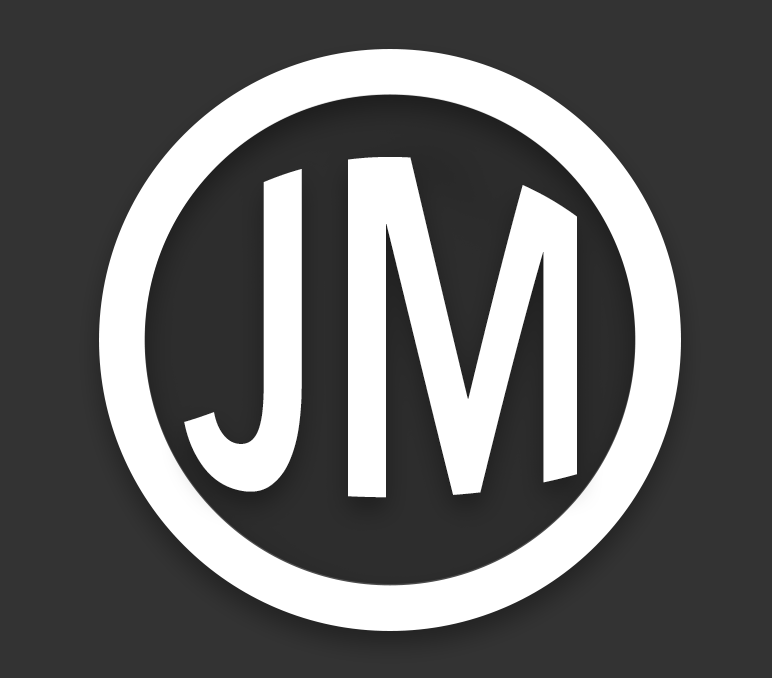
<style>
.page{position:relative;width:772px;height:678px;background:#333333}
.page>*{position:absolute;margin:0}
.t1{font:332px "AvenirNext-DemiBold";color:#ffffff;text-transform:uppercase;scale:0.88 1}
</style>
<div class="page">
<p class="t1" style="left:184px;top:157px;width:393px;height:341px">JM</p>
</div>
